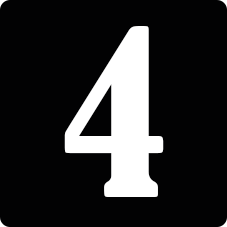
<style>
.page{position:relative;width:227px;height:227px;background:#020203}
.page>*{position:absolute;margin:0}
.t1{font:216px "BernardMT-Condensed";color:#ffffff}
</style>
<div class="page">
<p class="t1" style="left:64px;top:26px;width:100px;height:171px">4</p>
</div>
